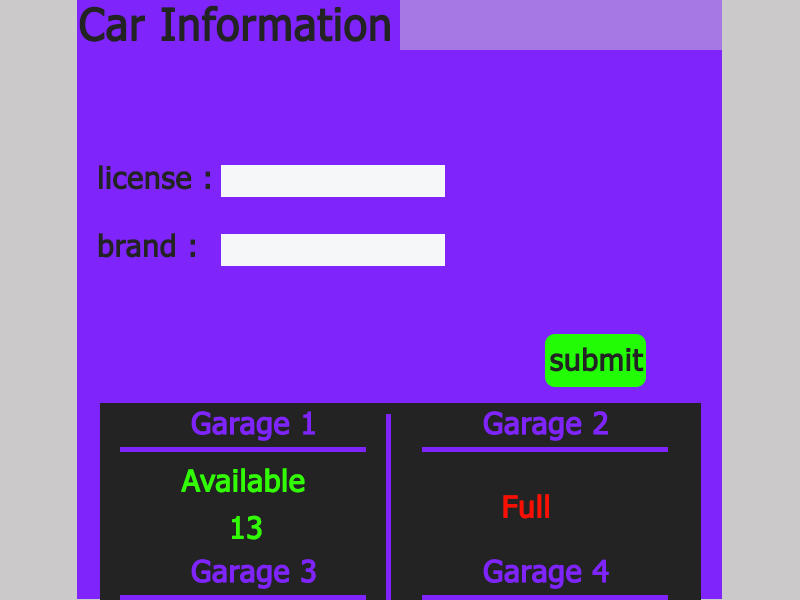
<style>
.page{position:relative;width:800px;height:600px;background:#7f24fa}
.page>*{position:absolute;margin:0}
.t1{font:44.4px "Tahoma";color:#242323;font-weight:bold;scale:0.96 1}
.t2{font:30px "Tahoma";color:#242323;font-weight:bold}
.t3{font:30px "Tahoma";color:#7f24fa;font-weight:bold}
.t4{font:30px "Tahoma";color:#32fc03;font-weight:bold}
.t5{font:30px "Tahoma";color:#fc0f03;font-weight:bold}
</style>
<div class="page">
<p class="t1" style="left:79px;top:5px;width:311px;height:37px">Car Information</p>
<p class="t2" style="left:99px;top:165px;width:111px;height:25px">license :</p>
<p class="t2" style="left:98px;top:233px;width:97px;height:25px">brand :</p>
<p class="t2" style="left:550px;top:347px;width:94px;height:25px">submit</p>
<p class="t3" style="left:191px;top:411px;width:124px;height:30px">Garage 1</p>
<p class="t3" style="left:483px;top:411px;width:125px;height:30px">Garage 2</p>
<p class="t4" style="left:181px;top:468px;width:124px;height:25px">Available</p>
<p class="t5" style="left:503px;top:494px;width:46px;height:25px">Full</p>
<p class="t4" style="left:232px;top:515px;width:30px;height:25px">13</p>
<p class="t3" style="left:191px;top:559px;width:125px;height:30px">Garage 3</p>
<p class="t3" style="left:483px;top:559px;width:126px;height:30px">Garage 4</p>
</div>
